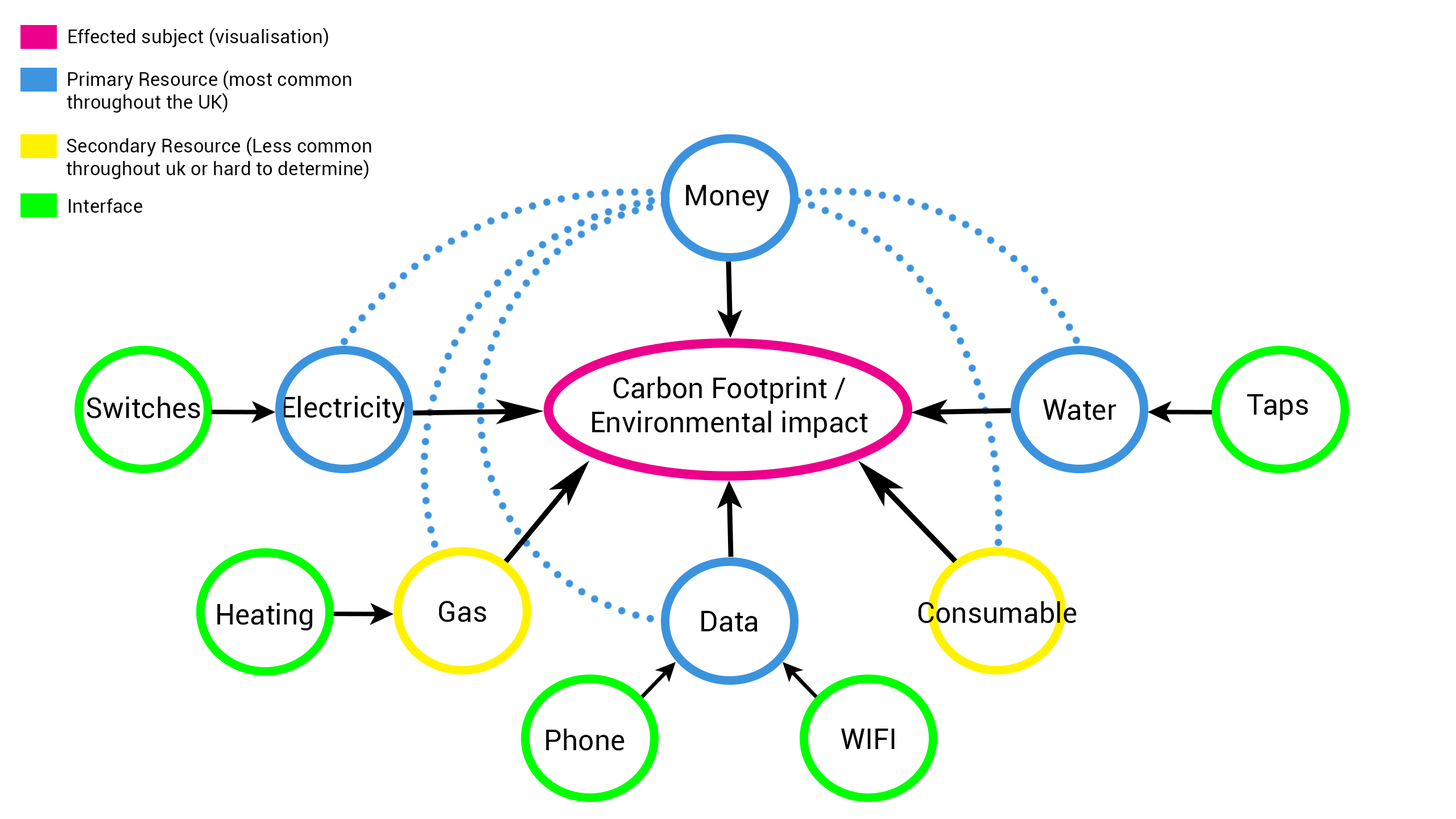
<style>
.page{position:relative;width:1456px;height:819px;background:#ffffff}
.page>*{position:absolute;margin:0}
.t1{font:19px "Roboto-Regular";color:#000000}
.t2{font:28.4px "Roboto-Regular";color:#000000}
</style>
<div class="page">
<p class="t1" style="left:68px;top:27px;width:260px;height:20px">Effected subject (visualisation)</p>
<p class="t1" style="left:67px;top:71px;width:284px;height:42px">Primary Resource (most common<br>throughout the UK)</p>
<p class="t1" style="left:66px;top:137px;width:305px;height:42px">Secondary Resource (Less common <br>throughout uk or hard to determine)</p>
<p class="t2" style="left:686px;top:185px;width:84px;height:27px">Money</p>
<p class="t1" style="left:69px;top:198px;width:73px;height:15px">Interface</p>
<p class="t2" style="left:592px;top:377px;width:276px;height:61px;text-align:center">Carbon Footprint /<br>Environmental impact</p>
<p class="t2" style="left:86px;top:396px;width:114px;height:23px">Switches</p>
<p class="t2" style="left:283px;top:396px;width:123px;height:28px">Electricity</p>
<p class="t2" style="left:1043px;top:399px;width:73px;height:21px">Water</p>
<p class="t2" style="left:1247px;top:394px;width:61px;height:26px">Taps</p>
<p class="t2" style="left:217px;top:603px;width:95px;height:28px">Heating</p>
<p class="t2" style="left:439px;top:601px;width:47px;height:21px">Gas</p>
<p class="t2" style="left:918px;top:601px;width:159px;height:22px">Consumable</p>
<p class="t2" style="left:701px;top:611px;width:57px;height:21px">Data</p>
<p class="t2" style="left:546px;top:729px;width:78px;height:22px">Phone</p>
<p class="t2" style="left:841px;top:729px;width:54px;height:20px">WIFI</p>
</div>
